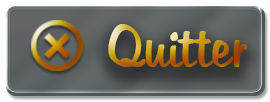
<style>
.page{position:relative;width:270px;height:102px}
.page>*{position:absolute;margin:0}
.t1{font:60.4px "Tabitha";scale:0.86 1}
</style>
<div class="page">
<p class="t1" style="left:108px;top:24px;width:139px;height:43px">Quitter</p>
</div>
